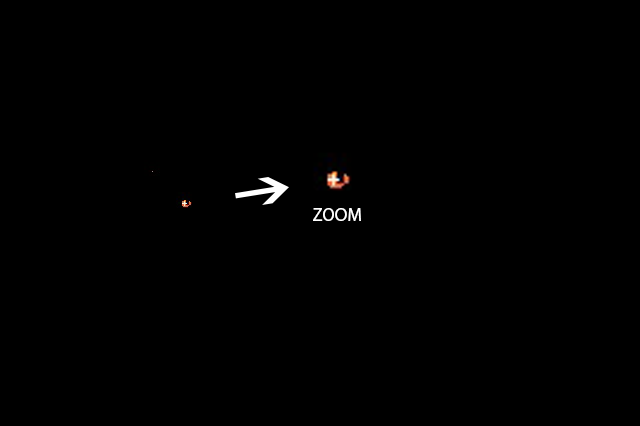
<style>
.page{position:relative;width:640px;height:426px;background:#000000}
.page>*{position:absolute;margin:0}
.t1{font:18px "MyriadPro-Regular";color:#ffffff}
</style>
<div class="page">
<p class="t1" style="left:313px;top:208px;width:48px;height:13px">ZOOM</p>
</div>
